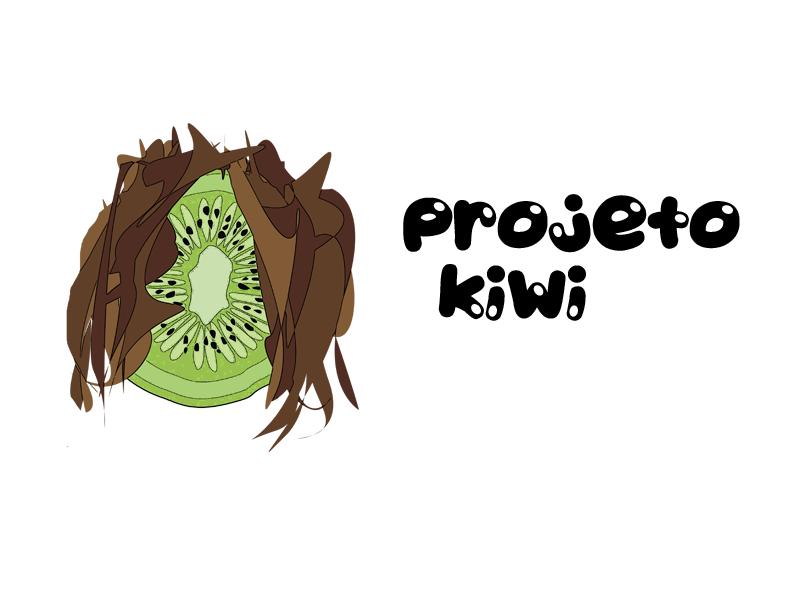
<style>
.page{position:relative;width:800px;height:600px;background:#ffffff}
.page>*{position:absolute;margin:0}
.t1{font:58.3px "JuicyFruity";color:#000000}
</style>
<div class="page">
<p class="t1" style="left:403px;top:194px;width:337px;height:127px">projeto<br> kiwi</p>
</div>
